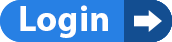
<style>
.page{position:relative;width:172px;height:42px;background:#2780e4}
.page>*{position:absolute;margin:0}
.t1{font:36.6px "MyriadPro-Bold";color:#ffffff}
</style>
<div class="page">
<p class="t1" style="left:20px;top:5px;width:88px;height:33px">Login</p>
</div>
